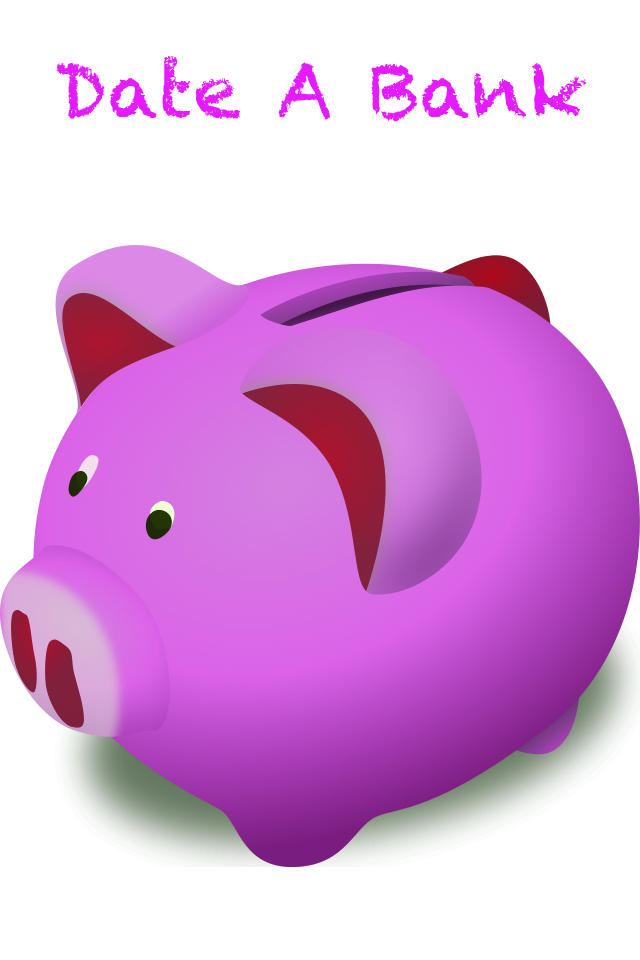
<style>
.page{position:relative;width:640px;height:960px;background:#ffffff}
.page>*{position:absolute;margin:0}
.t1{font:75px "Chalkduster";color:#e41aff}
</style>
<div class="page">
<p class="t1" style="left:56px;top:56px;width:531px;height:66px">Date A Bank</p>
</div>
